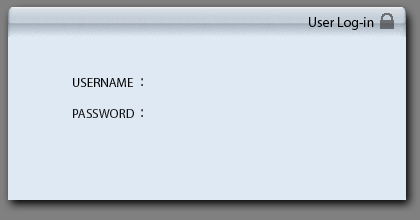
<style>
.page{position:relative;width:420px;height:220px;background:#dfe9f4}
.page>*{position:absolute;margin:0}
.t1{font:14px "Myriad-Roman";color:#000000}
.t2{font:13px "Myriad-Roman";color:#040404}
.t3{font:14px "Verdana";color:#3f454b}
.t4{font:13px "Myriad-Roman";color:#111112}
</style>
<div class="page">
<p class="t1" style="left:309px;top:17px;width:65px;height:13px">User Log-in</p>
<p class="t2" style="left:73px;top:78px;width:60px;height:9px">USERNAME</p>
<p class="t3" style="left:141px;top:78px;width:2px;height:8px">:</p>
<p class="t4" style="left:73px;top:109px;width:61px;height:9px">PASSWORD</p>
<p class="t3" style="left:141px;top:109px;width:2px;height:8px">:</p>
</div>
